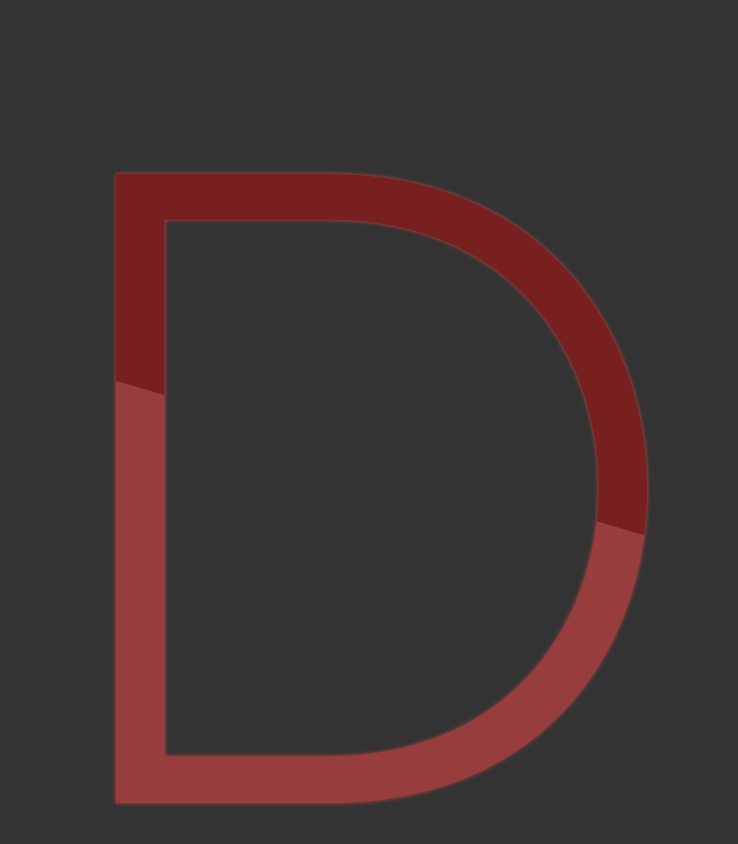
<style>
.page{position:relative;width:738px;height:844px;background:#333333}
.page>*{position:absolute;margin:0}
.t1{font:897.6px "NexaLight"}
</style>
<div class="page">
<p class="t1" style="left:116px;top:174px;width:532px;height:629px">D</p>
</div>
